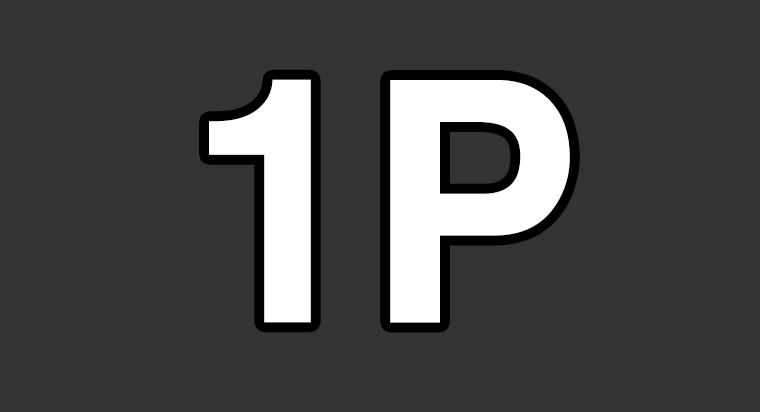
<style>
.page{position:relative;width:760px;height:412px;background:#333333}
.page>*{position:absolute;margin:0}
.t1{font:316.4px "H2gtrE";letter-spacing:-0.033em;color:#ffffff}
</style>
<div class="page">
<p class="t1" style="left:209px;top:79px;width:361px;height:244px">1P</p>
</div>
